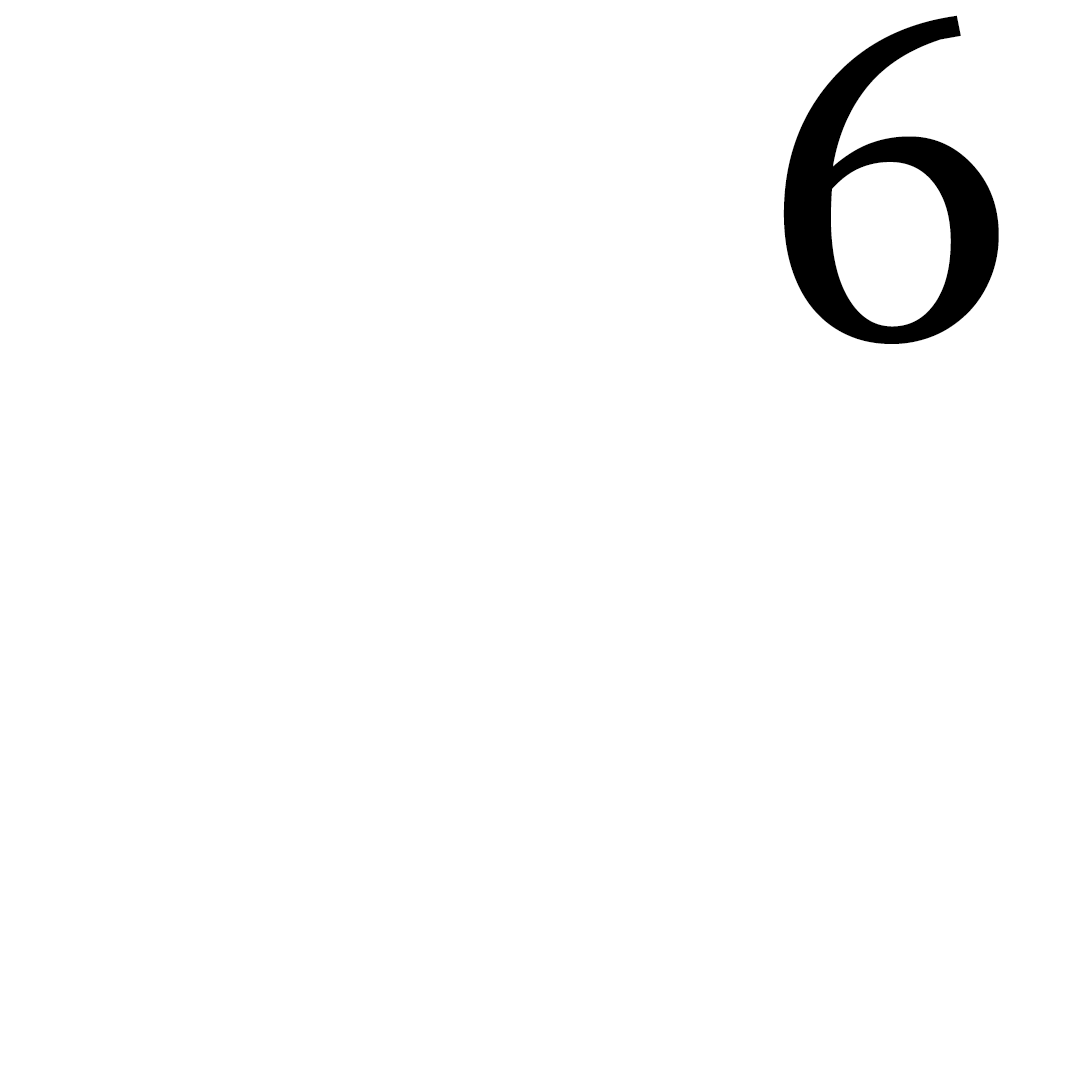
<style>
.page{position:relative;width:1080px;height:1080px;background:#ffffff}
.page>*{position:absolute;margin:0}
.t1{font:452.5px "Georgia";color:#000000}
</style>
<div class="page">
<p class="t1" style="left:783px;top:15px;width:216px;height:329px">6</p>
</div>
